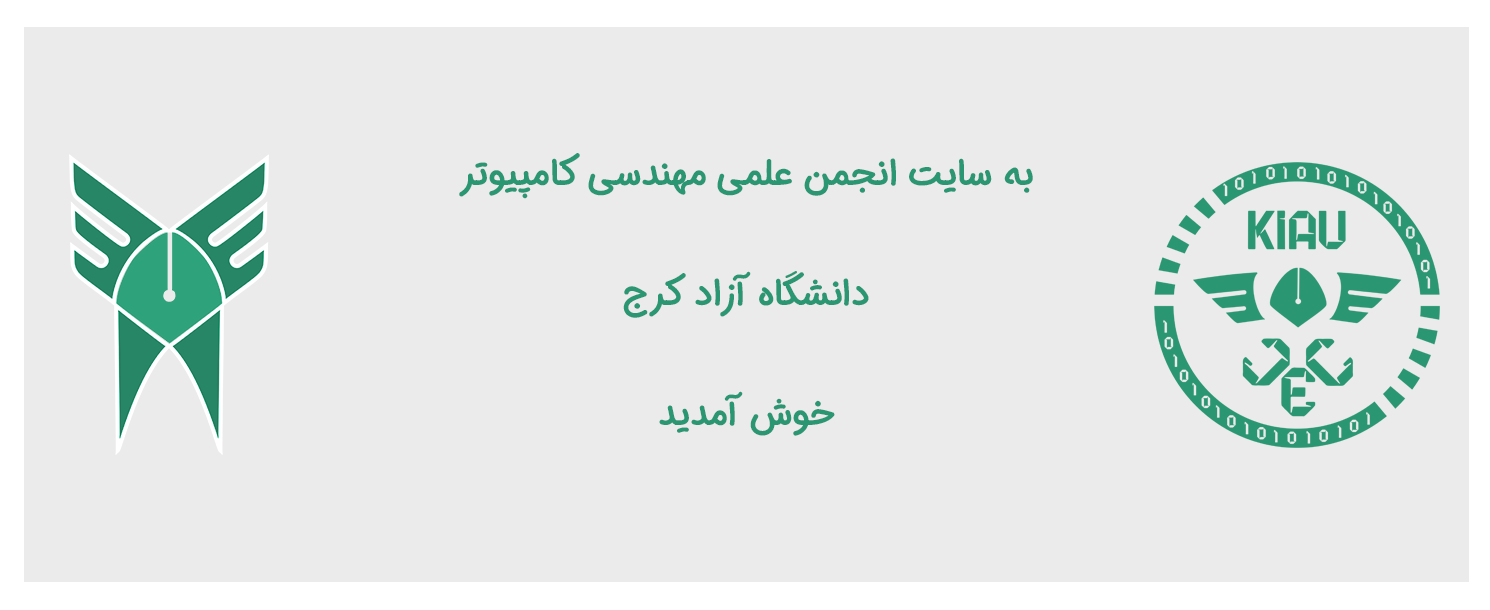
<style>
.page{position:relative;width:1490px;height:610px;background:#ebebeb}
.page>*{position:absolute;margin:0}
.t1{font:36px/60px "IRANSansDNFaNum-Bold";color:#2b9672}
</style>
<div class="page">
<p class="t1" style="left:459px;top:153px;width:574px;height:283px;text-align:center">به سایت انجمن علمی مهندسی کامپیوتر<br><br>دانشگاه آزاد کرج<br><br>خوش آمدید</p>
</div>
